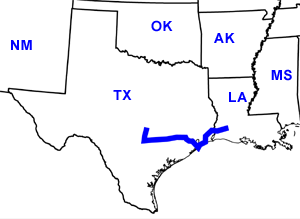
<style>
.page{position:relative;width:300px;height:219px;background:#ffffff}
.page>*{position:absolute;margin:0}
.t1{font:14px "Arial-BoldMT";letter-spacing:0.05em;color:#0000ff}
</style>
<div class="page">
<p class="t1" style="left:151px;top:20px;width:22px;height:12px">OK</p>
<p class="t1" style="left:11px;top:40px;width:21px;height:10px">NM</p>
<p class="t1" style="left:214px;top:33px;width:21px;height:10px">AK</p>
<p class="t1" style="left:271px;top:69px;width:21px;height:12px">MS</p>
<p class="t1" style="left:113px;top:90px;width:19px;height:10px">TX</p>
<p class="t1" style="left:229px;top:92px;width:18px;height:10px">LA</p>
</div>
